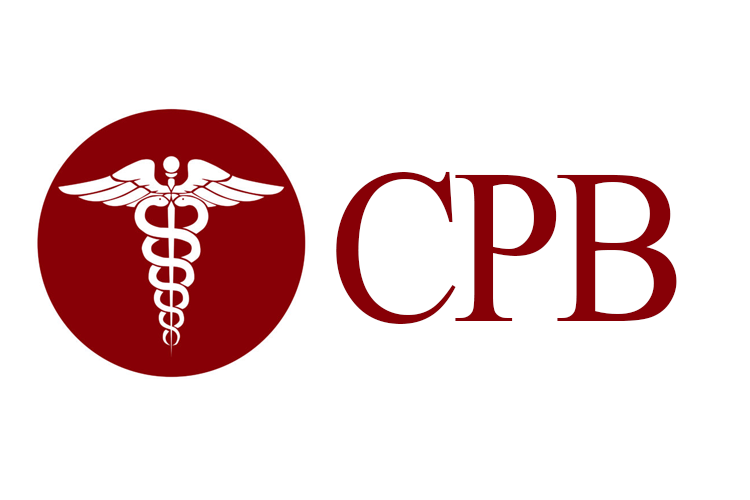
<style>
.page{position:relative;width:750px;height:500px;background:#ffffff}
.page>*{position:absolute;margin:0}
.t1{font:220px "TimesNewRomanPSMT";letter-spacing:-0.05em;color:#870006;scale:0.91 1}
</style>
<div class="page">
<p class="t1" style="left:336px;top:171px;width:341px;height:153px">CPB</p>
</div>
